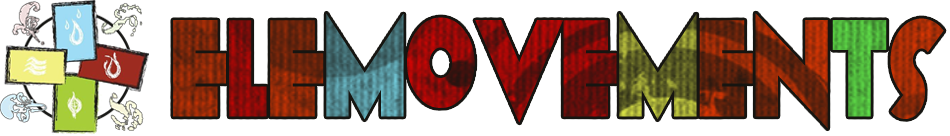
<style>
.page{position:relative;width:950px;height:136px;background:#ffffff}
.page>*{position:absolute;margin:0}
.t1{font:140.5px "Anagram";scale:0.74 1}
</style>
<div class="page">
<p class="t1" style="left:173px;top:13px;width:771px;height:116px">Elemovements</p>
</div>
